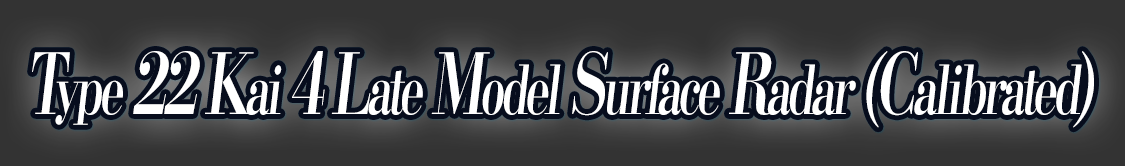
<style>
.page{position:relative;width:1125px;height:166px;background:#333333}
.page>*{position:absolute;margin:0}
.t1{font:67.2px "KochoStd-Heavy";letter-spacing:-0.08em;color:#ffffff;font-style:italic;scale:0.67 1}
.t2{font:84px "KochoStd-Heavy";letter-spacing:-0.08em;color:#ffffff;font-style:italic;scale:0.67 1}
</style>
<div class="page">
<p class="t1" style="left:32px;top:51px;width:1062px;height:77px"><span class="t2">T</span>ype <span class="t2">22 K</span>ai <span class="t2">4 L</span>ate <span class="t2">M</span>odel <span class="t2">S</span>urface <span class="t2">R</span>adar <span class="t2">(C</span>alibrated<span class="t2">)</span></p>
</div>
